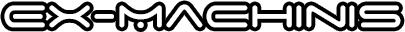
<style>
.page{position:relative;width:405px;height:32px;background:#ffffff}
.page>*{position:absolute;margin:0}
.t1{font:50px "SpaceAge";color:#ffffff}
</style>
<div class="page">
<p class="t1" style="left:4px;top:4px;width:397px;height:24px">Ex-Machinis</p>
</div>
